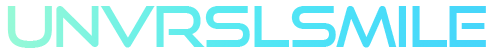
<style>
.page{position:relative;width:492px;height:54px;background:#ffffff}
.page>*{position:absolute;margin:0}
.t1{font:55.6px "GoodTimesRg-Regular";letter-spacing:-0.025em;color:#54e8f3}
</style>
<div class="page">
<p class="t1" style="left:7px;top:6px;width:479px;height:42px">UNVRSLSMILE</p>
</div>
